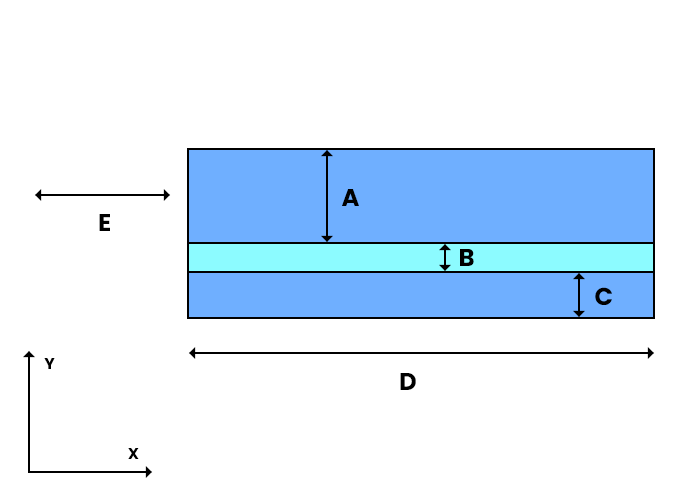
<style>
.page{position:relative;width:700px;height:500px;background:#ffffff}
.page>*{position:absolute;margin:0}
.t1{font:24.3px "Poppins-Bold";letter-spacing:-0.03em;color:#000000}
.t2{font:15.7px "Poppins-Bold";letter-spacing:-0.03em;color:#000000}
</style>
<div class="page">
<p class="t1" style="left:342px;top:189px;width:17px;height:17px">A</p>
<p class="t1" style="left:99px;top:214px;width:11px;height:17px">E</p>
<p class="t1" style="left:460px;top:249px;width:14px;height:17px">B</p>
<p class="t1" style="left:595px;top:287px;width:17px;height:18px">C</p>
<p class="t2" style="left:44px;top:358px;width:11px;height:11px">Y</p>
<p class="t1" style="left:400px;top:373px;width:16px;height:17px">D</p>
<p class="t2" style="left:128px;top:448px;width:11px;height:11px">X</p>
</div>
